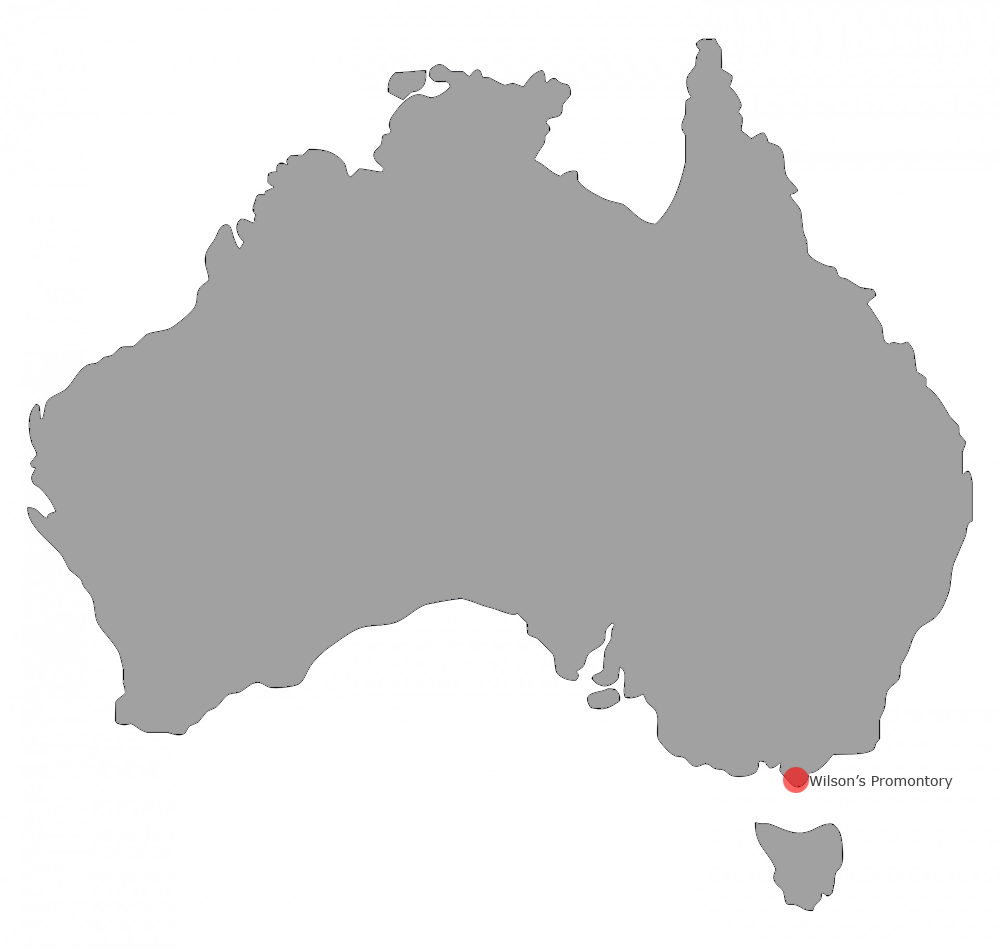
<style>
.page{position:relative;width:1000px;height:949px;background:#a1a1a1}
.page>*{position:absolute;margin:0}
.t1{font:14px "Verdana";color:#464646}
</style>
<div class="page">
<p class="t1" style="left:809px;top:775px;width:144px;height:14px">Wilson’s Promontory</p>
</div>
